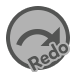
<style>
.page{position:relative;width:72px;height:72px;background:#ffffff}
.page>*{position:absolute;margin:0}
.t1{font:18.8px "MikadoMedium";color:#535453}
</style>
<div class="page">
<p class="t1" style="left:27px;top:43px;width:41px;height:28px;rotate:-30deg">Redo</p>
</div>
